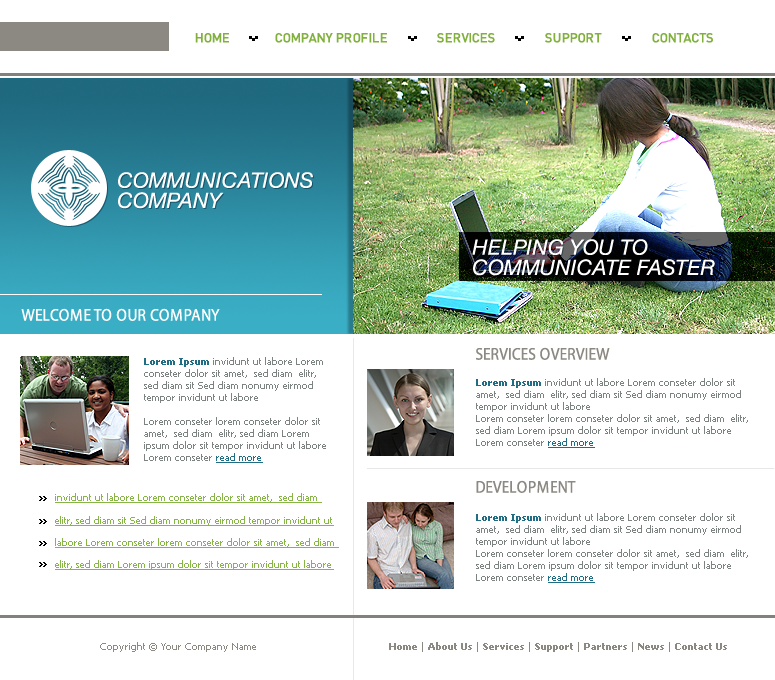
<style>
.page{position:relative;width:775px;height:680px;background:#ffffff}
.page>*{position:absolute;margin:0}
.t1{font:13px "DINCE-Medium";color:#81b03c}
.t2{font:21px/20.2px "HelveticaNeueLTStd-It";color:#ffffff;text-transform:uppercase}
.t3{font:17px "MyriadPro-SemiCn";letter-spacing:0.02em;color:#ffffff;text-transform:uppercase}
.t4{font:17px "MyriadPro-SemiCn";letter-spacing:0.02em;color:#8c8982;text-transform:uppercase}
.t5{font:10px "Tahoma";color:#7d8381}
.t6{font:10px "Tahoma-Bold";color:#216e84}
.t7{font:10px "Tahoma";color:#216e84;text-decoration:underline}
.t8{font:10px/22.3px "Tahoma";color:#88b547;text-decoration:underline}
.t9{font:10px "Tahoma";color:#8c8982}
.t10{font:10px "Tahoma-Bold";color:#8c8982}
</style>
<div class="page">
<p class="t1" style="left:195px;top:33px;width:34px;height:10px">HOME</p>
<p class="t1" style="left:275px;top:33px;width:112px;height:10px">COMPANY PROFILE</p>
<p class="t1" style="left:437px;top:33px;width:58px;height:10px">SERVICES</p>
<p class="t1" style="left:545px;top:33px;width:57px;height:10px">SUPPORT</p>
<p class="t1" style="left:652px;top:33px;width:61px;height:10px">CONTACTS</p>
<p class="t2" style="left:118px;top:172px;width:195px;height:37px">communications<br>company</p>
<p class="t2" style="left:472px;top:239px;width:243px;height:37px">helping you to <br>communicate faster</p>
<p class="t3" style="left:21px;top:308px;width:199px;height:13px">welcome to our company</p>
<p class="t4" style="left:476px;top:347px;width:134px;height:13px">services overview</p>
<p class="t5" style="left:144px;top:357px;width:182px;height:106px"><span class="t6">Lorem Ipsum </span>invidunt ut labore Lorem conseter dolor sit amet,  sed diam  elitr, sed diam sit Sed diam nonumy eirmod tempor invidunt ut labore <br><br>Lorem conseter lorem conseter dolor sit amet,  sed diam  elitr, sed diam Lorem ipsum dolor sit tempor invidunt ut labore Lorem conseter <span class="t7">read more</span></p>
<p class="t5" style="left:476px;top:378px;width:272px;height:70px"><span class="t6">Lorem Ipsum </span>invidunt ut labore Lorem conseter dolor sit amet,  sed diam  elitr, sed diam sit Sed diam nonumy eirmod tempor invidunt ut labore <br>Lorem conseter lorem conseter dolor sit amet,  sed diam  elitr, sed diam Lorem ipsum dolor sit tempor invidunt ut labore Lorem conseter <span class="t7">read more</span></p>
<p class="t4" style="left:476px;top:480px;width:100px;height:13px">development</p>
<p class="t8" style="left:55px;top:493px;width:284px;height:77px">invidunt ut labore Lorem conseter dolor sit amet,  sed diam  elitr, sed diam sit Sed diam nonumy eirmod tempor invidunt ut labore Lorem conseter lorem conseter dolor sit amet,  sed diam  elitr, sed diam Lorem ipsum dolor sit tempor invidunt ut labore</p>
<p class="t5" style="left:476px;top:513px;width:272px;height:70px"><span class="t6">Lorem Ipsum </span>invidunt ut labore Lorem conseter dolor sit amet,  sed diam  elitr, sed diam sit Sed diam nonumy eirmod tempor invidunt ut labore <br>Lorem conseter lorem conseter dolor sit amet,  sed diam  elitr, sed diam Lorem ipsum dolor sit tempor invidunt ut labore Lorem conseter <span class="t7">read more</span></p>
<p class="t9" style="left:100px;top:642px;width:156px;height:10px">Copyright © Your Company Name</p>
<p class="t10" style="left:389px;top:642px;width:338px;height:10px"><span class="t9">  </span>Home <span class="t9">| </span>About Us <span class="t9">| </span>Services <span class="t9">| </span>Support <span class="t9">| </span>Partners <span class="t9">| </span>News <span class="t9">| </span>Contact Us</p>
</div>
